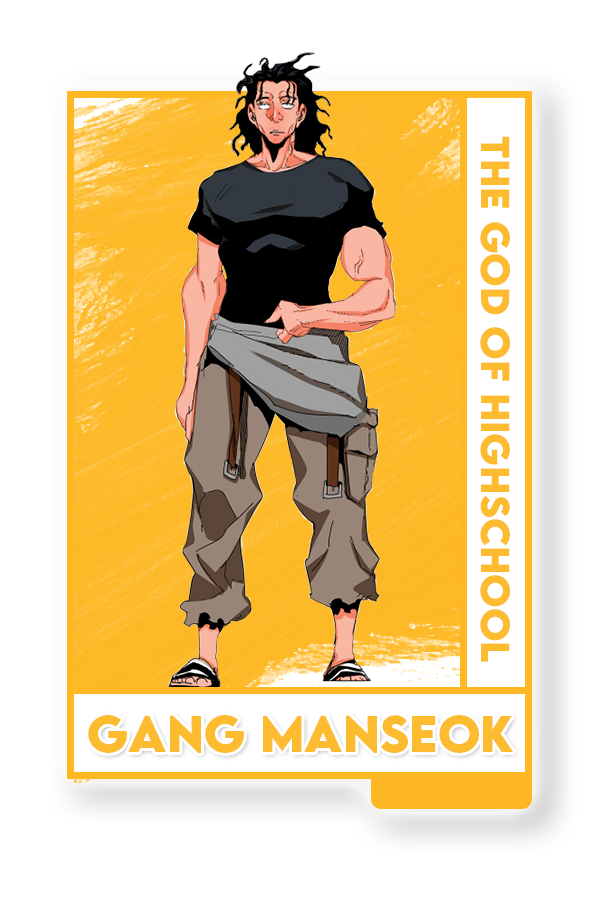
<style>
.page{position:relative;width:600px;height:900px;background:#ffffff}
.page>*{position:absolute;margin:0}
.t1{font:36px "LEMONMILK-Bold";color:#fdbc30}
.t2{font:45.6px "LEMONMILK-Bold";color:#fdbc30}
</style>
<div class="page">
<p class="t1" style="left:480px;top:136px;width:30px;height:526px;rotate:90deg">the god of highschool</p>
<p class="t2" style="left:88px;top:715px;width:425px;height:38px">Gang Manseok</p>
</div>
